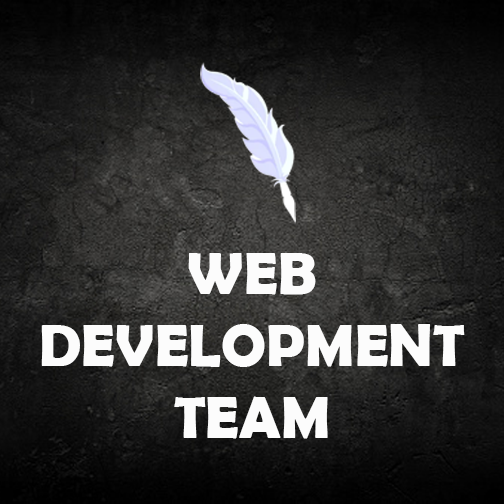
<style>
.page{position:relative;width:504px;height:504px}
.page>*{position:absolute;margin:0}
.t1{font:60px "BerlinSansFBDemi-Bold";color:#fcfcfc}
</style>
<div class="page">
<p class="t1" style="left:41px;top:253px;width:424px;height:186px;text-align:center">WEB<br>DEVELOPMENT<br>TEAM</p>
</div>
